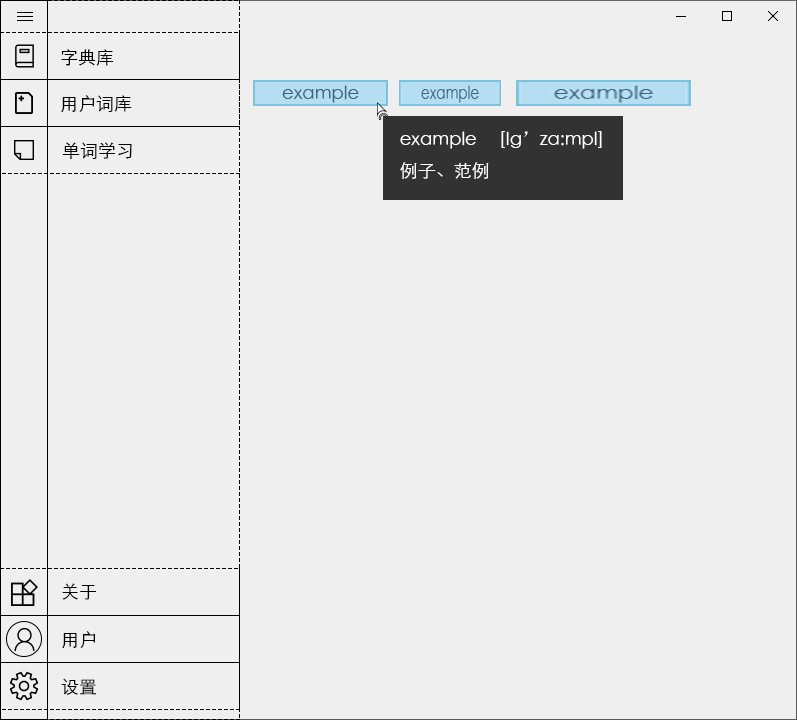
<style>
.page{position:relative;width:797px;height:720px;background:#efefef}
.page>*{position:absolute;margin:0}
.t1{font:18px "STXihei";color:#000000}
.t2{font:18px "STXihei";color:#ffffff}
.t3{font:18px "SimSun";color:#ffffff}
</style>
<div class="page">
<p class="t1" style="left:61px;top:49px;width:53px;height:17px">字典库</p>
<p class="t1" style="left:61px;top:95px;width:71px;height:17px">用户词库</p>
<p class="t2" style="left:400px;top:131px;width:202px;height:48px">example     [Ig<span class="t3">’</span>zɑ:mpl]<br>例子、范例</p>
<p class="t1" style="left:62px;top:142px;width:70px;height:17px">单词学习</p>
<p class="t1" style="left:62px;top:583px;width:34px;height:17px">关于</p>
<p class="t1" style="left:62px;top:631px;width:34px;height:17px">用户</p>
<p class="t1" style="left:61px;top:678px;width:36px;height:17px">设置</p>
</div>
